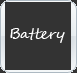
<style>
.page{position:relative;width:77px;height:73px;background:#333333}
.page>*{position:absolute;margin:0}
.t1{font:14.7px "SegoeScript";color:#ffffff}
</style>
<div class="page">
<p class="t1" style="left:10px;top:28px;width:55px;height:15px">Battery</p>
</div>
